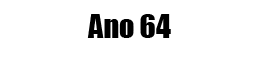
<style>
.page{position:relative;width:260px;height:60px;background:#ffffff}
.page>*{position:absolute;margin:0}
.t1{font:30px "Impact";color:#000000}
</style>
<div class="page">
<p class="t1" style="left:87px;top:14px;width:84px;height:24px">Ano 64</p>
</div>
